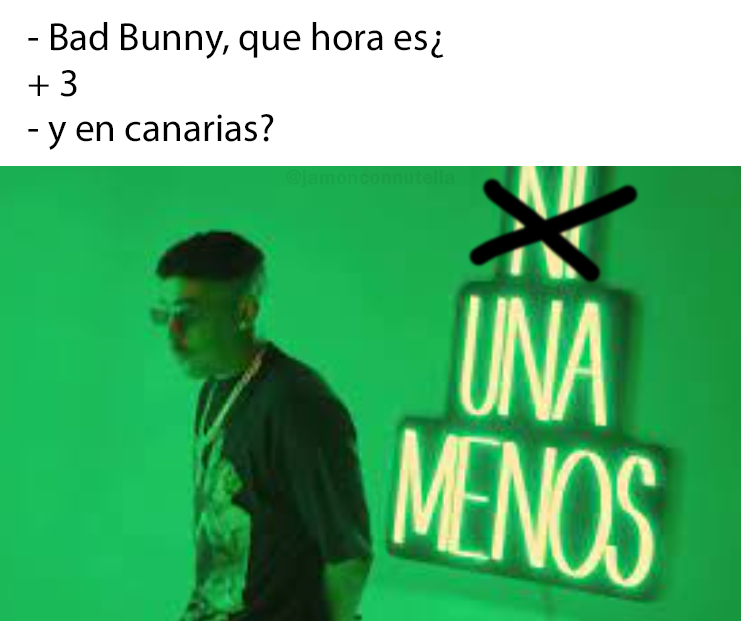
<style>
.page{position:relative;width:741px;height:621px;background:#ffffff}
.page>*{position:absolute;margin:0}
.t1{font:39.3px "MyriadPro-Regular";color:#000000}
.t2{font:20.9px "FranklinGothic-Demi";color:#19a04a}
</style>
<div class="page">
<p class="t1" style="left:28px;top:22px;width:416px;height:128px">- Bad Bunny, que hora es¿<br>+ 3<br>- y en canarias?</p>
<p class="t2" style="left:286px;top:169px;width:169px;height:19px">@jamonconnutella</p>
</div>
